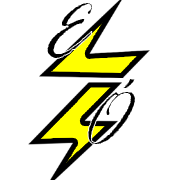
<style>
.page{position:relative;width:180px;height:180px;background:#ffffff}
.page>*{position:absolute;margin:0}
.t1{font:84px "RageItalic";color:#000000}
</style>
<div class="page">
<p class="t1" style="left:46px;top:2px;width:47px;height:57px">E</p>
<p class="t1" style="left:87px;top:78px;width:49px;height:67px">Ó</p>
</div>
